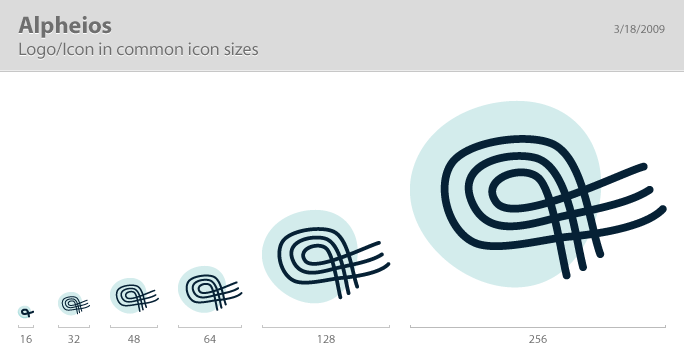
<style>
.page{position:relative;width:684px;height:360px;background:#ffffff}
.page>*{position:absolute;margin:0}
.t1{font:18px/22px "Myriad-Roman";color:#6f6f6f}
.t2{font:24px/24px "Myriad-Bold";color:#6f6f6f}
.t3{font:12px "Myriad-Roman";color:#6f6f6f}
.t4{font:12px "Myriad-Roman"}
</style>
<div class="page">
<p class="t1" style="left:18px;top:16px;width:240px;height:43px"><span class="t2">Alpheios<br></span>Logo/Icon in common icon sizes</p>
<p class="t3" style="left:614px;top:24px;width:51px;height:10px">3/18/2009</p>
<p class="t4" style="left:21px;top:335px;width:11px;height:8px">16</p>
<p class="t3" style="left:68px;top:335px;width:12px;height:8px">32</p>
<p class="t3" style="left:128px;top:335px;width:12px;height:8px">48</p>
<p class="t3" style="left:204px;top:335px;width:12px;height:8px">64</p>
<p class="t3" style="left:318px;top:335px;width:17px;height:8px">128</p>
<p class="t3" style="left:529px;top:335px;width:18px;height:8px">256</p>
</div>
